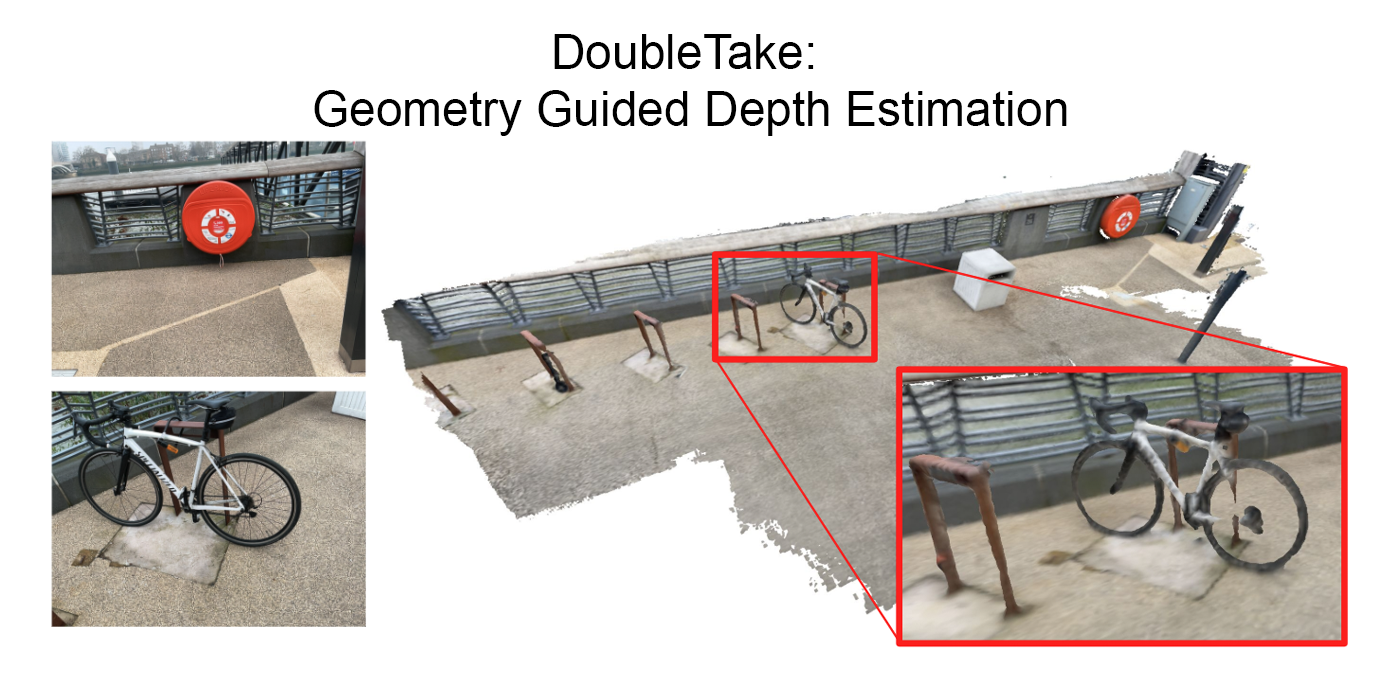
<style>
.page{position:relative;width:1380px;height:687px;background:#ffffff}
.page>*{position:absolute;margin:0}
.t1{font:48px "ArialMT";color:#000000}
</style>
<div class="page">
<p class="t1" style="left:314px;top:34px;width:753px;height:102px;text-align:center">DoubleTake: <br>Geometry Guided Depth Estimation</p>
</div>
